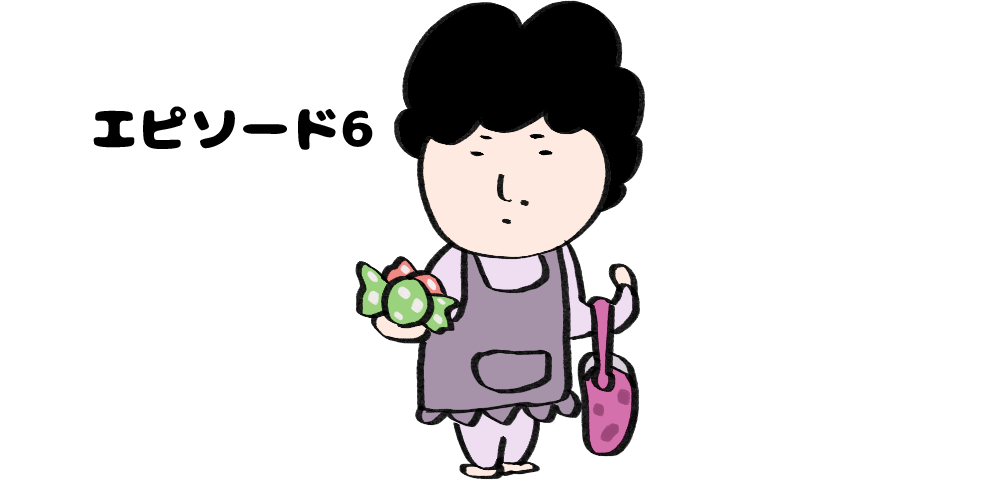
<style>
.page{position:relative;width:1000px;height:480px;background:#ffffff}
.page>*{position:absolute;margin:0}
.t1{font:50px "07NikumaruFont";letter-spacing:0.08em;color:#000000}
</style>
<div class="page">
<p class="t1" style="left:93px;top:106px;width:280px;height:44px">エピソード6</p>
</div>
